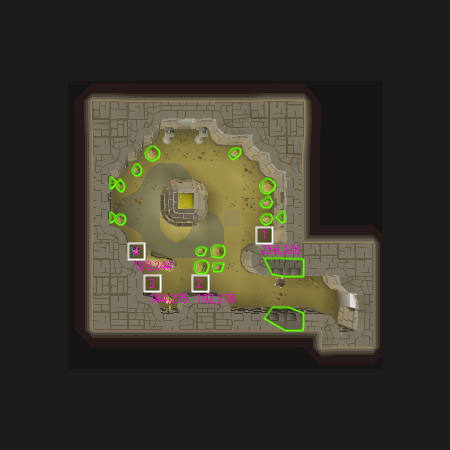
<style>
.page{position:relative;width:450px;height:450px;background:#1b1b1b}
.page>*{position:absolute;margin:0}
.t1{font:12px "SegoeUI";color:#ff00d8}
</style>
<div class="page">
<p class="t1" style="left:262px;top:230px;width:38px;height:26px">1<br>256,228</p>
<p class="t1" style="left:133px;top:247px;width:39px;height:25px">4<br>128,244</p>
<p class="t1" style="left:150px;top:279px;width:37px;height:26px">3<br>144,275</p>
<p class="t1" style="left:197px;top:279px;width:38px;height:26px">2<br>192,276</p>
</div>
